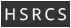
<style>
.page{position:relative;width:71px;height:28px;background:#333333}
.page>*{position:absolute;margin:0}
.t1{font:16.3px "OpenSans";letter-spacing:0.2em;color:#ffffff}
</style>
<div class="page">
<p class="t1" style="left:5px;top:8px;width:61px;height:13px">HSRCS</p>
</div>
